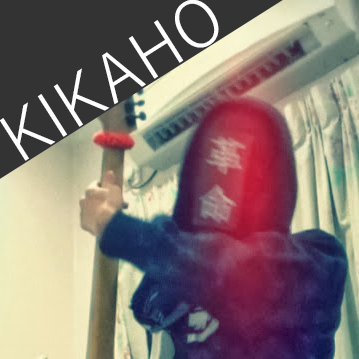
<style>
.page{position:relative;width:359px;height:359px}
.page>*{position:absolute;margin:0}
.t1{font:65.7px "YuGothic-Regular";color:#ffffff}
</style>
<div class="page">
<p class="t1" style="left:0px;top:0px;width:219px;height:161px;rotate:-32deg">KIKAHO</p>
</div>
